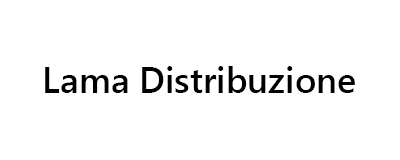
<style>
.page{position:relative;width:400px;height:160px;background:#ffffff}
.page>*{position:absolute;margin:0}
.t1{font:36px "SegoeUI-Semibold";color:#000000}
</style>
<div class="page">
<p class="t1" style="left:45px;top:66px;width:310px;height:27px">Lama Distribuzione</p>
</div>
